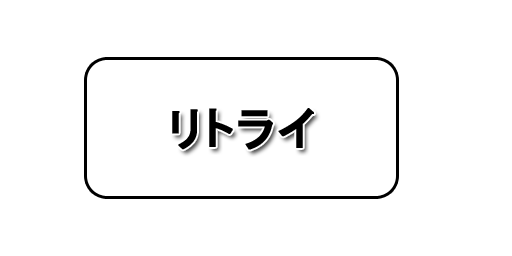
<style>
.page{position:relative;width:512px;height:256px;background:#ffffff}
.page>*{position:absolute;margin:0}
.t1{font:46px "HGPGothicE";letter-spacing:0.05em;color:#000000;font-weight:bold}
</style>
<div class="page">
<p class="t1" style="left:172px;top:108px;width:142px;height:42px">リトライ</p>
</div>
